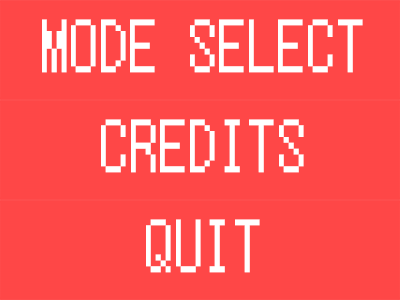
<style>
.page{position:relative;width:400px;height:300px;background:#ff4747}
.page>*{position:absolute;margin:0}
.t1{font:75px "Terminal";color:#ffffff;scale:0.84 1}
</style>
<div class="page">
<p class="t1" style="left:42px;top:19px;width:321px;height:54px">MODE SELECT</p>
<p class="t1" style="left:101px;top:119px;width:203px;height:54px">CREDITS</p>
<p class="t1" style="left:146px;top:219px;width:114px;height:54px">QUIT</p>
</div>
